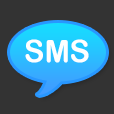
<style>
.page{position:relative;width:114px;height:114px;background:#333333}
.page>*{position:absolute;margin:0}
.t1{font:30.7px "ArialRoundedMTBold";color:#ffffff}
</style>
<div class="page">
<p class="t1" style="left:25px;top:39px;width:64px;height:24px">SMS</p>
</div>
